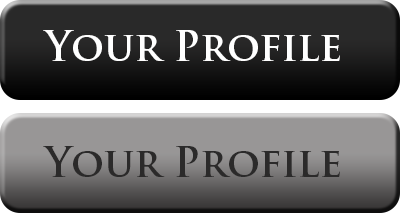
<style>
.page{position:relative;width:400px;height:213px}
.page>*{position:absolute;margin:0}
.t1{font:40px "TrajanPro-Bold";color:#ffffff}
.t2{font:40px "TrajanPro-Bold";color:#2b2a2a}
</style>
<div class="page">
<p class="t1" style="left:43px;top:30px;width:297px;height:31px">Your Profile</p>
<p class="t2" style="left:43px;top:146px;width:297px;height:31px">Your Profile</p>
</div>
